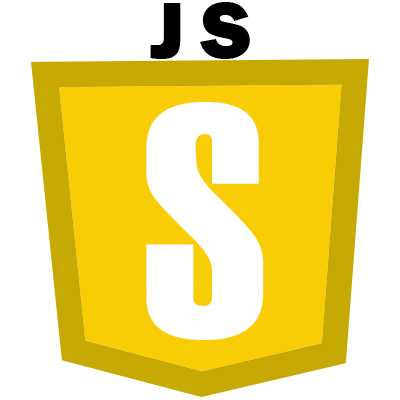
<style>
.page{position:relative;width:400px;height:400px;background:#ffffff}
.page>*{position:absolute;margin:0}
.t1{font:83.3px "FranklinGothic-Heavy";letter-spacing:0.2em;color:#000000}
.t2{font:333.3px "Haettenschweiler";letter-spacing:0.2em;color:#fefffe}
</style>
<div class="page">
<p class="t1" style="left:150px;top:2px;width:100px;height:57px">JS</p>
<p class="t2" style="left:146px;top:102px;width:118px;height:238px">S</p>
</div>
